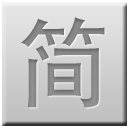
<style>
.page{position:relative;width:130px;height:130px}
.page>*{position:absolute;margin:0}
.t1{font:96.2px "AdobeHeitiStd-Regular";color:#868686}
</style>
<div class="page">
<p class="t1" style="left:21px;top:17px;width:84px;height:91px">简</p>
</div>
